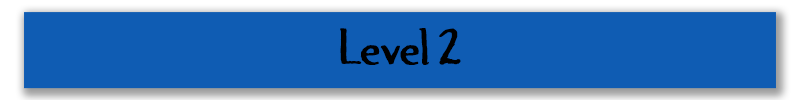
<style>
.page{position:relative;width:800px;height:100px;background:#0f5cb3}
.page>*{position:absolute;margin:0}
.t1{font:41px "JandaAmazingGrace";color:#000000}
</style>
<div class="page">
<p class="t1" style="left:340px;top:28px;width:121px;height:37px">Level 2</p>
</div>
